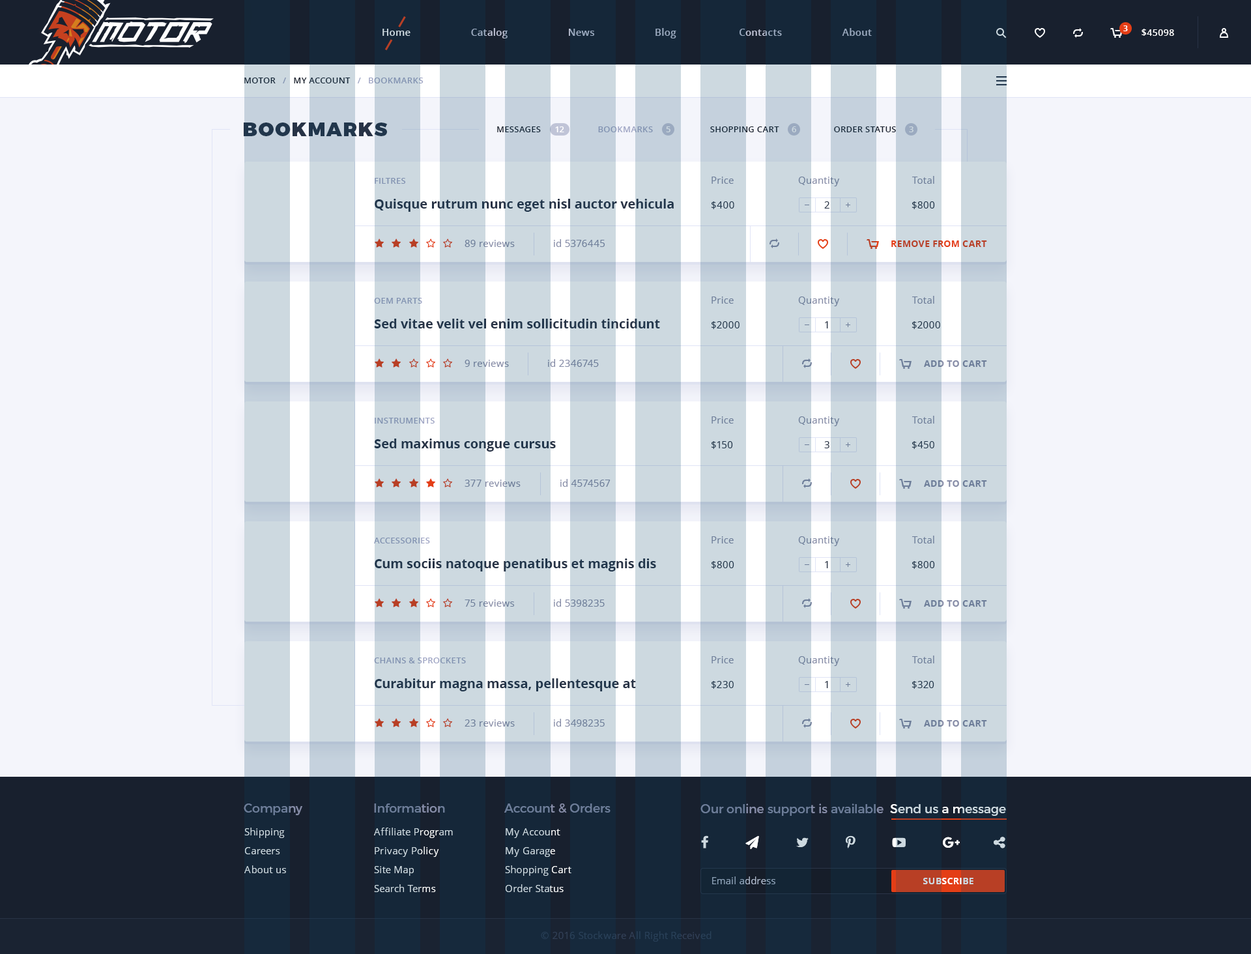
<style>
.page{position:relative;width:1251px;height:954px;background:#f4f5fb}
.page>*{position:absolute;margin:0}
.t1{font:9.8px "OpenSans-Semibold";letter-spacing:0.02em}
.t2{font:7.8px "OpenSans-Bold";color:#ffffff}
.t3{font:9.1px "OpenSans-Semibold";letter-spacing:0.02em;color:#ffffff;text-transform:uppercase}
.t4{font:8.5px "OpenSans-Semibold";letter-spacing:0.02em;text-transform:uppercase}
.t5{font:19.5px "Montserrat-Black";letter-spacing:0.06em;color:#283346;text-transform:uppercase}
.t6{font:8.5px "OpenSans-Semibold";letter-spacing:0.02em;color:#18202e;text-transform:uppercase}
.t7{font:8.5px "OpenSans-Semibold";letter-spacing:0.02em;color:#a0a6c5;text-transform:uppercase}
.t8{font:8.5px "OpenSans-Semibold";letter-spacing:0.02em;color:#ffffff;text-transform:uppercase}
.t9{font:8.5px "OpenSans-Semibold";letter-spacing:0.02em;color:#cdd9e0;text-transform:uppercase}
.t10{font:8.5px "OpenSans-Semibold";letter-spacing:0.02em;color:#8192b1;text-transform:uppercase}
.t11{font:9.8px "OpenSans";letter-spacing:0.02em;color:#6d7d99}
.t12{font:9.8px "OpenSans";letter-spacing:0.02em}
.t13{font:13px "OpenSans-Bold";color:#283346}
.t14{font:9.8px "OpenSans";letter-spacing:0.02em;color:#283346}
.t15{font:9.1px "OpenSans-Bold";letter-spacing:0.02em;color:#b83f25;text-transform:uppercase}
.t16{font:9.1px "OpenSans-Bold";letter-spacing:0.02em;color:#6d7d99;text-transform:uppercase}
.t17{font:12.4px "Montserrat-Regular";color:#6d7d99}
.t18{font:12.4px "Montserrat-Regular"}
.t19{font:9.8px/18.9px "OpenSans";letter-spacing:0.02em;color:#cdd9e0}
.t20{font:9.1px "OpenSans-Bold";letter-spacing:0.02em}
.t21{font:9.8px "OpenSans";letter-spacing:0.02em;color:#324057}
</style>
<div class="page">
<p class="t1" style="left:382px;top:28px;width:489px;height:10px">Home                      Catalog                      News                      Blog                       Contacts                      About</p>
<p class="t2" style="left:1123px;top:25px;width:4px;height:6px">3</p>
<p class="t3" style="left:1141px;top:29px;width:33px;height:7px">$45098</p>
<p class="t4" style="left:244px;top:78px;width:179px;height:5px">Motor   /   My Account   /   Bookmarks</p>
<p class="t5" style="left:244px;top:122px;width:144px;height:14px">BOOKMARKS</p>
<p class="t6" style="left:497px;top:126px;width:399px;height:6px">Messages                        <span class="t7">Bookmarks                        </span>Shopping Cart                       Order Status</p>
<p class="t8" style="left:555px;top:126px;width:9px;height:6px">12</p>
<p class="t9" style="left:666px;top:126px;width:4px;height:6px">5</p>
<p class="t9" style="left:791px;top:126px;width:5px;height:6px">6</p>
<p class="t9" style="left:909px;top:126px;width:4px;height:6px">3</p>
<p class="t10" style="left:375px;top:178px;width:31px;height:6px">Filtres</p>
<p class="t11" style="left:711px;top:177px;width:22px;height:7px">Price</p>
<p class="t12" style="left:798px;top:177px;width:42px;height:9px">Quantity</p>
<p class="t11" style="left:912px;top:176px;width:22px;height:8px">Total</p>
<p class="t13" style="left:375px;top:199px;width:298px;height:13px">Quisque rutrum nunc eget nisl auctor vehicula</p>
<p class="t14" style="left:711px;top:201px;width:23px;height:8px">$400</p>
<p class="t14" style="left:824px;top:201px;width:5px;height:7px">2</p>
<p class="t14" style="left:911px;top:201px;width:24px;height:8px">$800</p>
<p class="t12" style="left:464px;top:240px;width:51px;height:7px">89 reviews</p>
<p class="t12" style="left:554px;top:239px;width:51px;height:8px">id 5376445</p>
<p class="t15" style="left:891px;top:240px;width:96px;height:7px">remove from cart</p>
<p class="t10" style="left:374px;top:298px;width:48px;height:6px">OEM Parts</p>
<p class="t11" style="left:711px;top:296px;width:22px;height:8px">Price</p>
<p class="t12" style="left:798px;top:296px;width:42px;height:10px">Quantity</p>
<p class="t11" style="left:912px;top:296px;width:22px;height:8px">Total</p>
<p class="t13" style="left:374px;top:318px;width:286px;height:10px">Sed vitae velit vel enim sollicitudin tincidunt</p>
<p class="t14" style="left:711px;top:321px;width:28px;height:8px">$2000</p>
<p class="t14" style="left:825px;top:321px;width:3px;height:7px">1</p>
<p class="t14" style="left:911px;top:321px;width:29px;height:8px">$2000</p>
<p class="t12" style="left:464px;top:360px;width:45px;height:7px">9 reviews</p>
<p class="t12" style="left:548px;top:359px;width:51px;height:8px">id 2346745</p>
<p class="t16" style="left:924px;top:360px;width:63px;height:7px">add to cart</p>
<p class="t10" style="left:375px;top:417px;width:59px;height:6px">Instruments</p>
<p class="t11" style="left:711px;top:416px;width:22px;height:7px">Price</p>
<p class="t12" style="left:798px;top:416px;width:42px;height:10px">Quantity</p>
<p class="t11" style="left:912px;top:416px;width:22px;height:7px">Total</p>
<p class="t13" style="left:374px;top:438px;width:182px;height:13px">Sed maximus congue cursus</p>
<p class="t14" style="left:711px;top:441px;width:22px;height:8px">$150</p>
<p class="t14" style="left:824px;top:441px;width:5px;height:7px">3</p>
<p class="t14" style="left:911px;top:441px;width:23px;height:8px">$450</p>
<p class="t12" style="left:464px;top:479px;width:56px;height:8px">377 reviews</p>
<p class="t11" style="left:560px;top:479px;width:50px;height:8px">id 4574567</p>
<p class="t16" style="left:924px;top:480px;width:63px;height:7px">add to cart</p>
<p class="t10" style="left:374px;top:537px;width:56px;height:6px">Accessories</p>
<p class="t11" style="left:711px;top:536px;width:22px;height:7px">Price</p>
<p class="t12" style="left:798px;top:536px;width:42px;height:10px">Quantity</p>
<p class="t11" style="left:912px;top:535px;width:22px;height:8px">Total</p>
<p class="t13" style="left:375px;top:558px;width:281px;height:13px">Cum sociis natoque penatibus et magnis dis</p>
<p class="t14" style="left:711px;top:561px;width:23px;height:8px">$800</p>
<p class="t14" style="left:825px;top:561px;width:3px;height:7px">1</p>
<p class="t14" style="left:911px;top:561px;width:24px;height:8px">$800</p>
<p class="t12" style="left:464px;top:599px;width:51px;height:7px">75 reviews</p>
<p class="t12" style="left:554px;top:599px;width:50px;height:7px">id 5398235</p>
<p class="t16" style="left:924px;top:600px;width:63px;height:6px">add to cart</p>
<p class="t10" style="left:374px;top:657px;width:92px;height:6px">Chains &amp; Sprockets</p>
<p class="t11" style="left:711px;top:656px;width:22px;height:7px">Price</p>
<p class="t12" style="left:798px;top:656px;width:42px;height:10px">Quantity</p>
<p class="t11" style="left:912px;top:655px;width:22px;height:8px">Total</p>
<p class="t13" style="left:375px;top:678px;width:261px;height:13px">Curabitur magna massa, pellentesque at</p>
<p class="t14" style="left:711px;top:681px;width:22px;height:7px">$230</p>
<p class="t14" style="left:825px;top:681px;width:3px;height:7px">1</p>
<p class="t14" style="left:911px;top:681px;width:23px;height:7px">$320</p>
<p class="t12" style="left:464px;top:719px;width:51px;height:7px">23 reviews</p>
<p class="t12" style="left:554px;top:718px;width:50px;height:8px">id 3498235</p>
<p class="t16" style="left:924px;top:720px;width:63px;height:6px">add to cart</p>
<p class="t17" style="left:244px;top:803px;width:58px;height:12px">Company</p>
<p class="t17" style="left:374px;top:802px;width:71px;height:10px">Information</p>
<p class="t17" style="left:504px;top:803px;width:106px;height:10px">Account &amp; Orders</p>
<p class="t18" style="left:700px;top:803px;width:306px;height:12px">Our online support is available  Send us a message</p>
<p class="t19" style="left:244px;top:827px;width:42px;height:46px">Shipping<br>Careers<br>About us</p>
<p class="t19" style="left:374px;top:827px;width:79px;height:65px">Affiliate Program<br>Privacy Policy<br>Site Map<br>Search Terms</p>
<p class="t19" style="left:505px;top:828px;width:66px;height:64px">My Account<br>My Garage<br>Shopping Cart<br>Order Status</p>
<p class="t12" style="left:712px;top:876px;width:63px;height:8px">Email address</p>
<p class="t20" style="left:923px;top:877px;width:50px;height:7px">SUBSCRIBE</p>
<p class="t21" style="left:541px;top:931px;width:170px;height:10px">© 2016 Stockware All Right Received</p>
</div>
